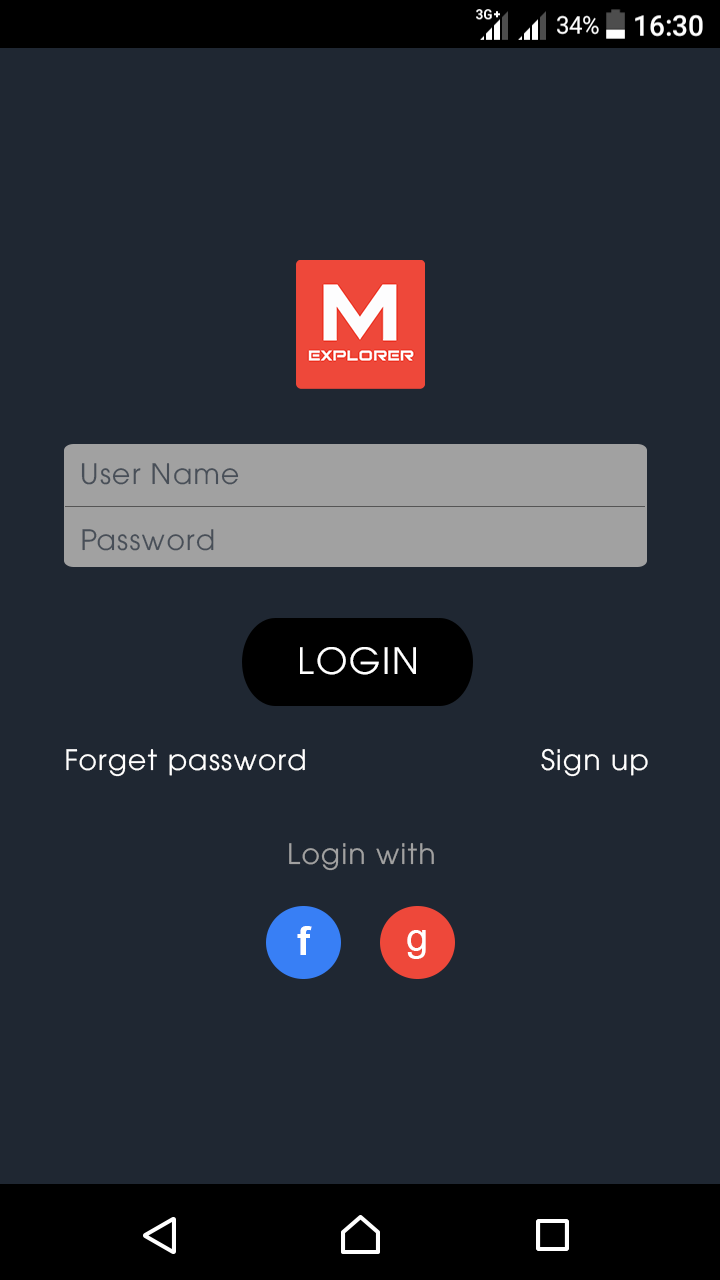
<style>
.page{position:relative;width:720px;height:1280px;background:#1f2732}
.page>*{position:absolute;margin:0}
.t1{font:28px "UTM-Avo";letter-spacing:0.05em;color:#484f58}
.t2{font:36px "UTM-Avo";letter-spacing:0.05em;color:#ffffff}
.t3{font:28px "UTM-Avo";letter-spacing:0.05em;color:#ffffff}
.t4{font:28px "UTM-Avo";letter-spacing:0.05em;color:#a1a1a1}
.t5{font:40px "Arial-BoldMT";letter-spacing:0.05em;color:#ffffff}
.t6{font:40px "ArialMT";letter-spacing:0.05em;color:#ffffff}
</style>
<div class="page">
<p class="t1" style="left:81px;top:463px;width:158px;height:22px">User Name</p>
<p class="t1" style="left:82px;top:529px;width:132px;height:22px">Password</p>
<p class="t2" style="left:300px;top:647px;width:116px;height:28px">LOGIN</p>
<p class="t3" style="left:66px;top:749px;width:239px;height:28px">Forget password</p>
<p class="t3" style="left:541px;top:748px;width:107px;height:29px">Sign up</p>
<p class="t4" style="left:289px;top:843px;width:145px;height:28px">Login with</p>
<p class="t5" style="left:297px;top:926px;width:15px;height:29px">f</p>
<p class="t6" style="left:407px;top:930px;width:19px;height:29px">g</p>
</div>
